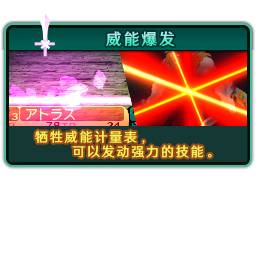
<style>
.page{position:relative;width:256px;height:256px;background:#ffffff}
.page>*{position:absolute;margin:0}
.t1{font:16px "HYWenHei-FEW";letter-spacing:0.145em;scale:0.97 1}
.t2{font:13.3px/14.7px "HYWenHei-FEW";letter-spacing:0.145em;color:#f9f055;scale:0.97 1}
</style>
<div class="page">
<p class="t1" style="left:106px;top:31px;width:69px;height:16px">威能爆发</p>
<p class="t2" style="left:35px;top:130px;width:177px;height:28px">牺牲威能计量表，<br>      可以发动强力的技能。</p>
</div>
